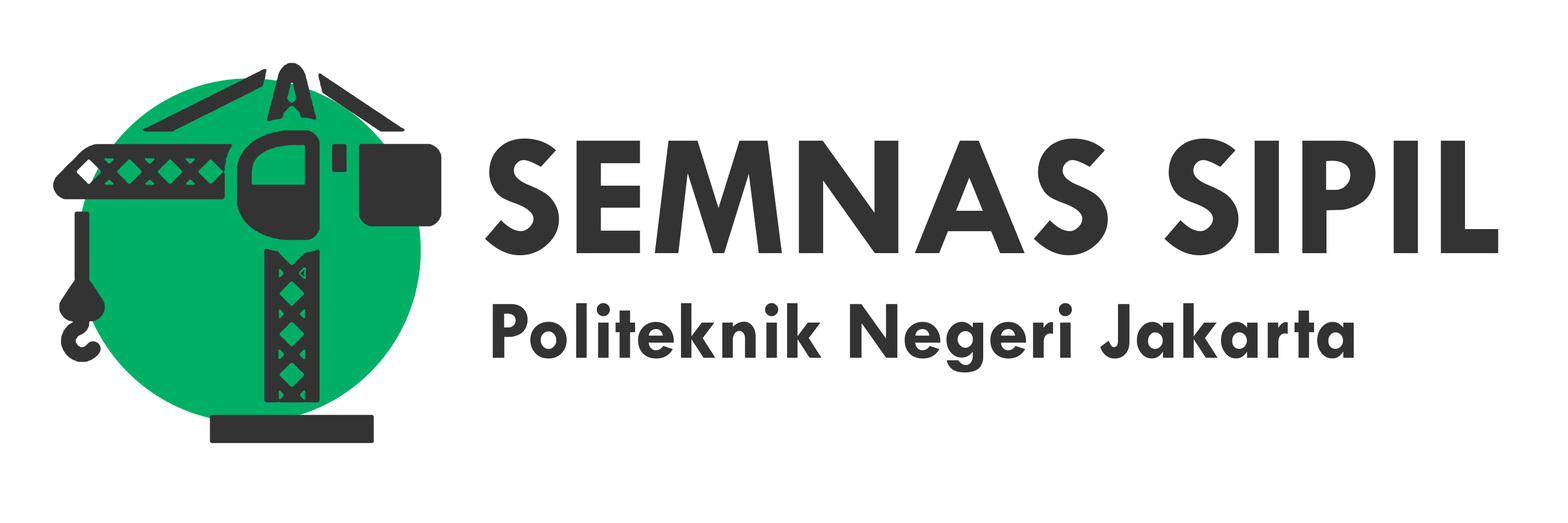
<style>
.page{position:relative;width:1568px;height:523px;background:#ffffff}
.page>*{position:absolute;margin:0}
.t1{font:175.6px "TwCenMT-Bold";color:#333333}
.t2{font:83.6px "TwCenMT-Bold";color:#333333}
</style>
<div class="page">
<p class="t1" style="left:485px;top:139px;width:1013px;height:116px">SEMNAS SIPIL</p>
<p class="t2" style="left:492px;top:303px;width:862px;height:70px">Politeknik Negeri Jakarta</p>
</div>
